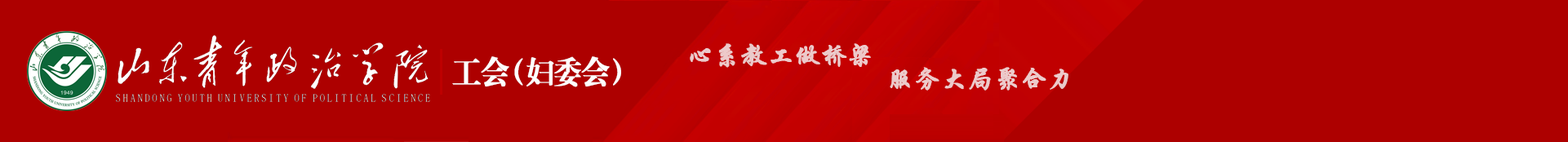
<style>
.page{position:relative;width:1568px;height:142px;background:#ad0000}
.page>*{position:absolute;margin:0}
.t1{font:26.1px "STXingkai";color:#edcaca;font-weight:bold}
.t2{font:30.6px "FZXBSJW--GB1-0";color:#fefefe;font-weight:bold;scale:0.91 1}
.t3{font:26.1px "STXingkai";color:#edcacb;font-weight:bold}
</style>
<div class="page">
<p class="t1" style="left:690px;top:43px;width:181px;height:25px">心系教工做桥梁</p>
<p class="t2" style="left:452px;top:56px;width:169px;height:31px">工会（妇委会）</p>
<p class="t3" style="left:890px;top:67px;width:178px;height:24px">服务大局聚合力</p>
</div>
